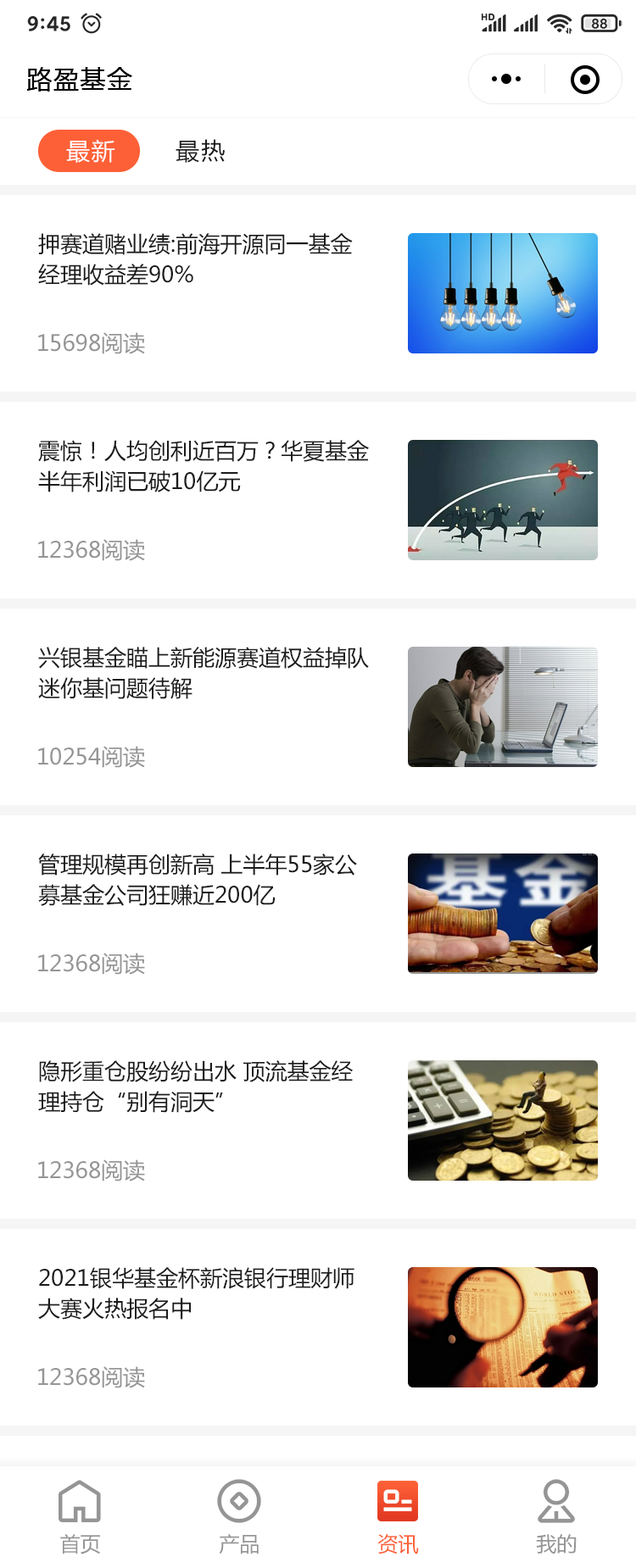
<style>
.page{position:relative;width:636px;height:1568px;background:#ffffff}
.page>*{position:absolute;margin:0}
.t1{font:25.4px "MicrosoftYaHei";letter-spacing:0.05em;color:#000000}
.t2{font:23.7px "MicrosoftYaHei";letter-spacing:0.06em;color:#ffffff;text-transform:uppercase}
.t3{font:23.7px "MicrosoftYaHei";letter-spacing:0.06em;color:#1b1b1b;text-transform:uppercase}
.t4{font:22px/30.5px "MicrosoftYaHei";color:#1b1b1b}
.t5{font:22px "MicrosoftYaHei";color:#959595}
.t6{font:20.3px "MicrosoftYaHei";color:#959595}
.t7{font:20.3px "MicrosoftYaHei";color:#fd6036}
</style>
<div class="page">
<p class="t1" style="left:26px;top:67px;width:106px;height:25px">路盈基金</p>
<p class="t2" style="left:66px;top:139px;width:159px;height:24px">最新<span class="t3">       最热</span></p>
<p class="t4" style="left:38px;top:233px;width:315px;height:53px">押赛道赌业绩:前海开源同一基金<br>经理收益差90%</p>
<p class="t5" style="left:38px;top:332px;width:107px;height:22px">15698阅读</p>
<p class="t4" style="left:38px;top:440px;width:331px;height:52px">震惊！人均创利近百万？华夏基金<br>半年利润已破10亿元</p>
<p class="t5" style="left:38px;top:539px;width:107px;height:22px">12368阅读</p>
<p class="t4" style="left:38px;top:647px;width:331px;height:52px">兴银基金瞄上新能源赛道权益掉队<br>迷你基问题待解</p>
<p class="t5" style="left:38px;top:746px;width:107px;height:22px">10254阅读</p>
<p class="t4" style="left:38px;top:854px;width:319px;height:52px">管理规模再创新高 上半年55家公<br>募基金公司狂赚近200亿</p>
<p class="t5" style="left:38px;top:953px;width:107px;height:22px">12368阅读</p>
<p class="t4" style="left:38px;top:1060px;width:315px;height:53px">隐形重仓股纷纷出水 顶流基金经<br>理持仓“别有洞天”</p>
<p class="t5" style="left:38px;top:1159px;width:107px;height:23px">12368阅读</p>
<p class="t4" style="left:38px;top:1267px;width:316px;height:53px">2021银华基金杯新浪银行理财师<br>大赛火热报名中</p>
<p class="t5" style="left:38px;top:1366px;width:107px;height:22px">12368阅读</p>
<p class="t6" style="left:60px;top:1534px;width:40px;height:20px">首页</p>
<p class="t6" style="left:219px;top:1534px;width:40px;height:20px">产品</p>
<p class="t7" style="left:377px;top:1533px;width:42px;height:21px">资讯</p>
<p class="t6" style="left:536px;top:1534px;width:40px;height:20px">我的</p>
</div>
